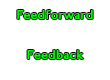
<style>
.page{position:relative;width:110px;height:80px;background:#ffffff}
.page>*{position:absolute;margin:0}
.t1{font:14px "P22JohnstonUnderground";color:#00ff00}
</style>
<div class="page">
<p class="t1" style="left:17px;top:10px;width:76px;height:9px">Feedforward</p>
<p class="t1" style="left:27px;top:50px;width:57px;height:9px">Feedback</p>
</div>
